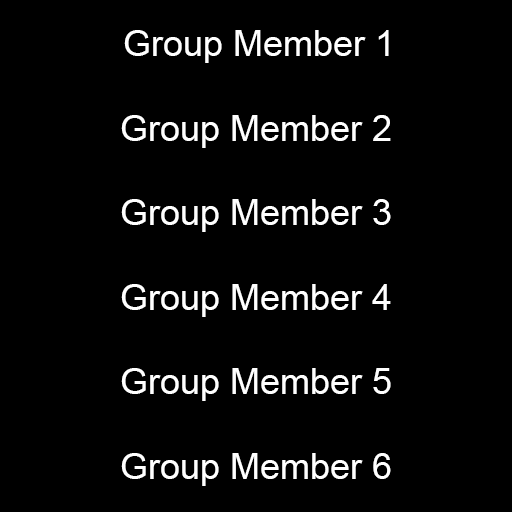
<style>
.page{position:relative;width:512px;height:512px;background:#000000}
.page>*{position:absolute;margin:0}
.t1{font:36px "ArialMT";color:#ffffff}
</style>
<div class="page">
<p class="t1" style="left:124px;top:30px;width:265px;height:33px">Group Member 1</p>
<p class="t1" style="left:121px;top:115px;width:270px;height:33px">Group Member 2</p>
<p class="t1" style="left:121px;top:199px;width:270px;height:33px">Group Member 3</p>
<p class="t1" style="left:121px;top:284px;width:270px;height:33px">Group Member 4</p>
<p class="t1" style="left:121px;top:368px;width:270px;height:33px">Group Member 5</p>
<p class="t1" style="left:121px;top:453px;width:270px;height:33px">Group Member 6</p>
</div>
